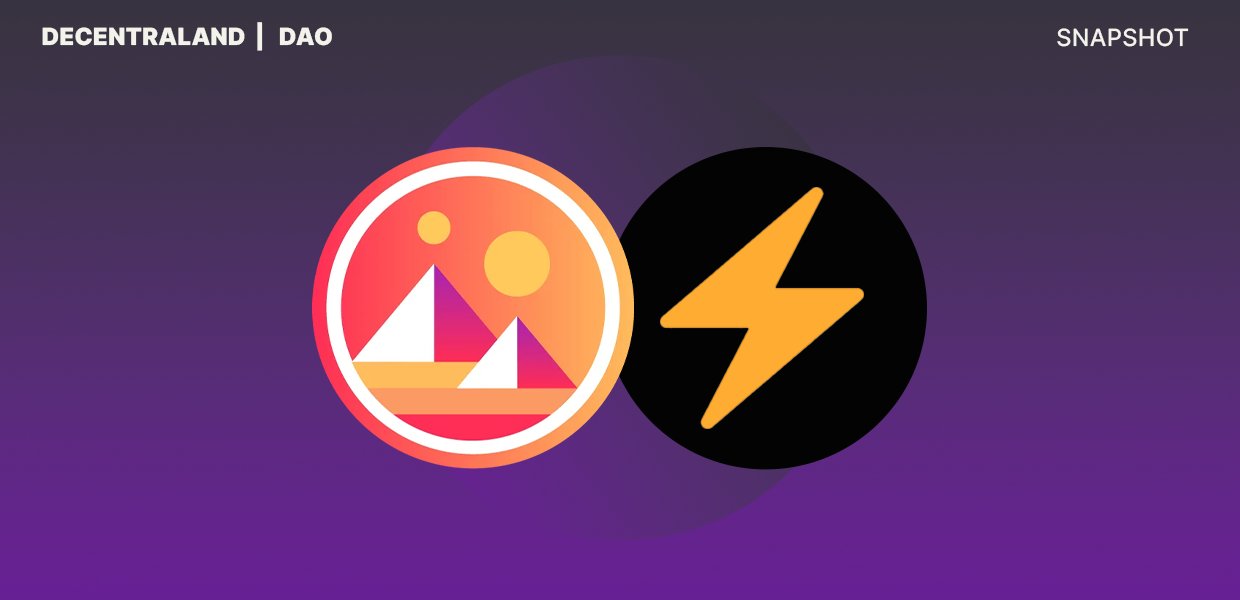
<style>
.page{position:relative;width:1240px;height:600px}
.page>*{position:absolute;margin:0}
.t1{font:23.8px "Inter-Black";color:#f3f2eb;text-transform:uppercase}
.t2{font:23.8px "Inter-Medium";color:#f3f2eb;text-transform:uppercase}
</style>
<div class="page">
<p class="t1" style="left:42px;top:22px;width:290px;height:29px">decentraland  |   DAO</p>
<p class="t2" style="left:1057px;top:28px;width:132px;height:19px">Snapshot</p>
</div>
